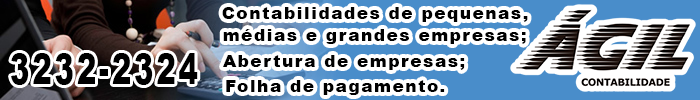
<style>
.page{position:relative;width:700px;height:100px;background:#ffffff}
.page>*{position:absolute;margin:0}
.t1{font:16.7px "Arial-Black";letter-spacing:0.1em;color:#000000}
.t2{font:42.1px "Arial-Black";letter-spacing:0.1em;color:#000000;scale:0.69 1}
</style>
<div class="page">
<p class="t1" style="left:222px;top:7px;width:306px;height:15px">Contabilidades de pequenas,</p>
<p class="t1" style="left:223px;top:29px;width:303px;height:15px">médias e grandes empresas;</p>
<p class="t2" style="left:11px;top:53px;width:187px;height:32px">3232-2324</p>
<p class="t1" style="left:223px;top:55px;width:242px;height:15px">Abertura de empresas;</p>
<p class="t1" style="left:226px;top:80px;width:219px;height:15px">Folha de pagamento.</p>
</div>
